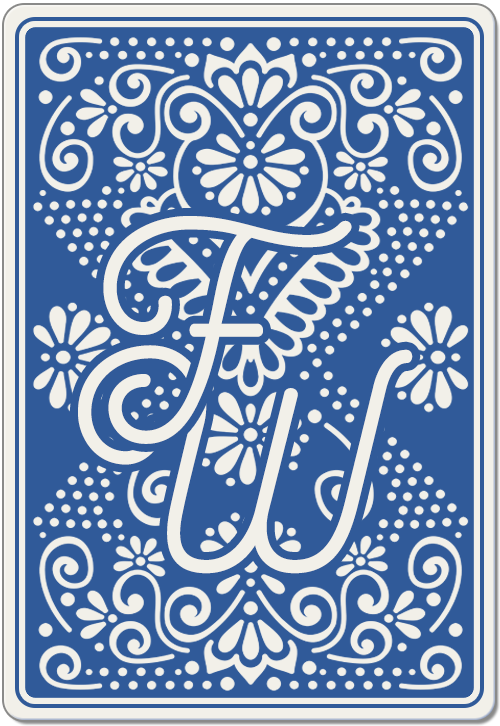
<style>
.page{position:relative;width:500px;height:726px;background:#305a99}
.page>*{position:absolute;margin:0}
.t1{font:316.7px "BourtonScriptBold";letter-spacing:-0.14em;color:#f2f0e9}
.t2{font:317.9px "BourtonScriptBold";letter-spacing:-0.14em;color:#f2f0e9}
</style>
<div class="page">
<p class="t1" style="left:103px;top:216px;width:249px;height:228px">F</p>
<p class="t2" style="left:78px;top:345px;width:335px;height:229px">W</p>
</div>
